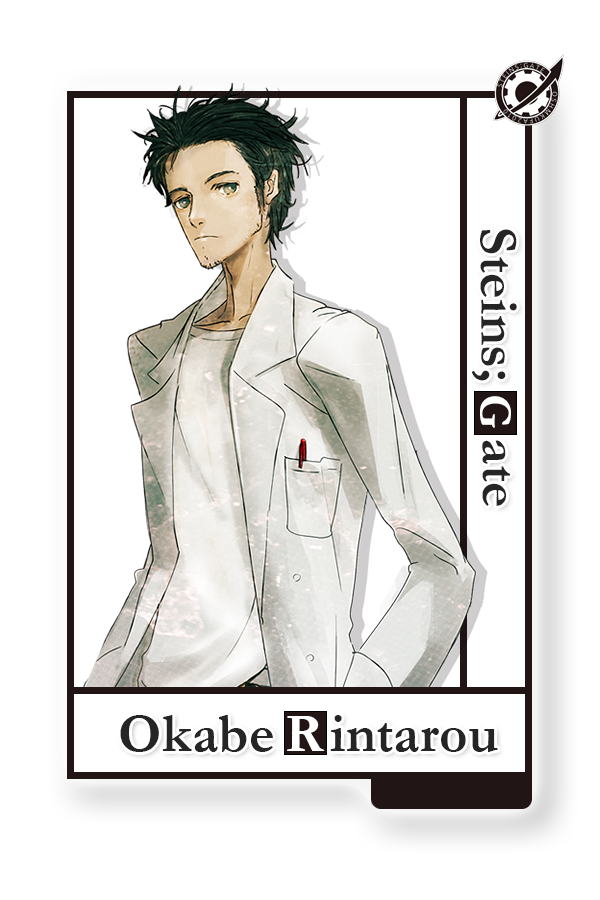
<style>
.page{position:relative;width:600px;height:900px;background:#ffffff}
.page>*{position:absolute;margin:0}
.t1{font:55.4px "Garamond-Bold";color:#252525}
.t2{font:47px "Garamond-Bold";color:#ffffff}
.t3{font:55.4px "Garamond-Bold";color:#ffffff}
</style>
<div class="page">
<p class="t1" style="left:472px;top:229px;width:45px;height:277px;rotate:89deg">Steins;    ate</p>
<p class="t2" style="left:480px;top:396px;width:31px;height:32px;rotate:90deg">G</p>
<p class="t1" style="left:120px;top:715px;width:378px;height:37px">Okabe    intarou</p>
<p class="t3" style="left:287px;top:716px;width:38px;height:35px">R</p>
</div>
